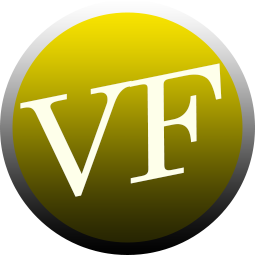
<style>
.page{position:relative;width:256px;height:256px;background:#ffffff}
.page>*{position:absolute;margin:0}
.t1{font:140.9px "Century";letter-spacing:-0.06em;color:#ffffea;scale:1.1 1}
</style>
<div class="page">
<p class="t1" style="left:20px;top:63px;width:202px;height:134px;rotate:-11deg">VF</p>
</div>
